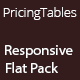
<style>
.page{position:relative;width:80px;height:80px;background:#341c1c}
.page>*{position:absolute;margin:0}
.t1{font:12.5px "OpenSans-Light";color:#ffffff}
.t2{font:14.6px "MyriadPro-Regular";color:#ffffff}
</style>
<div class="page">
<p class="t1" style="left:3px;top:7px;width:74px;height:13px">PricingTables</p>
<p class="t2" style="left:5px;top:45px;width:68px;height:28px">Responsive<br>Flat Pack</p>
</div>
